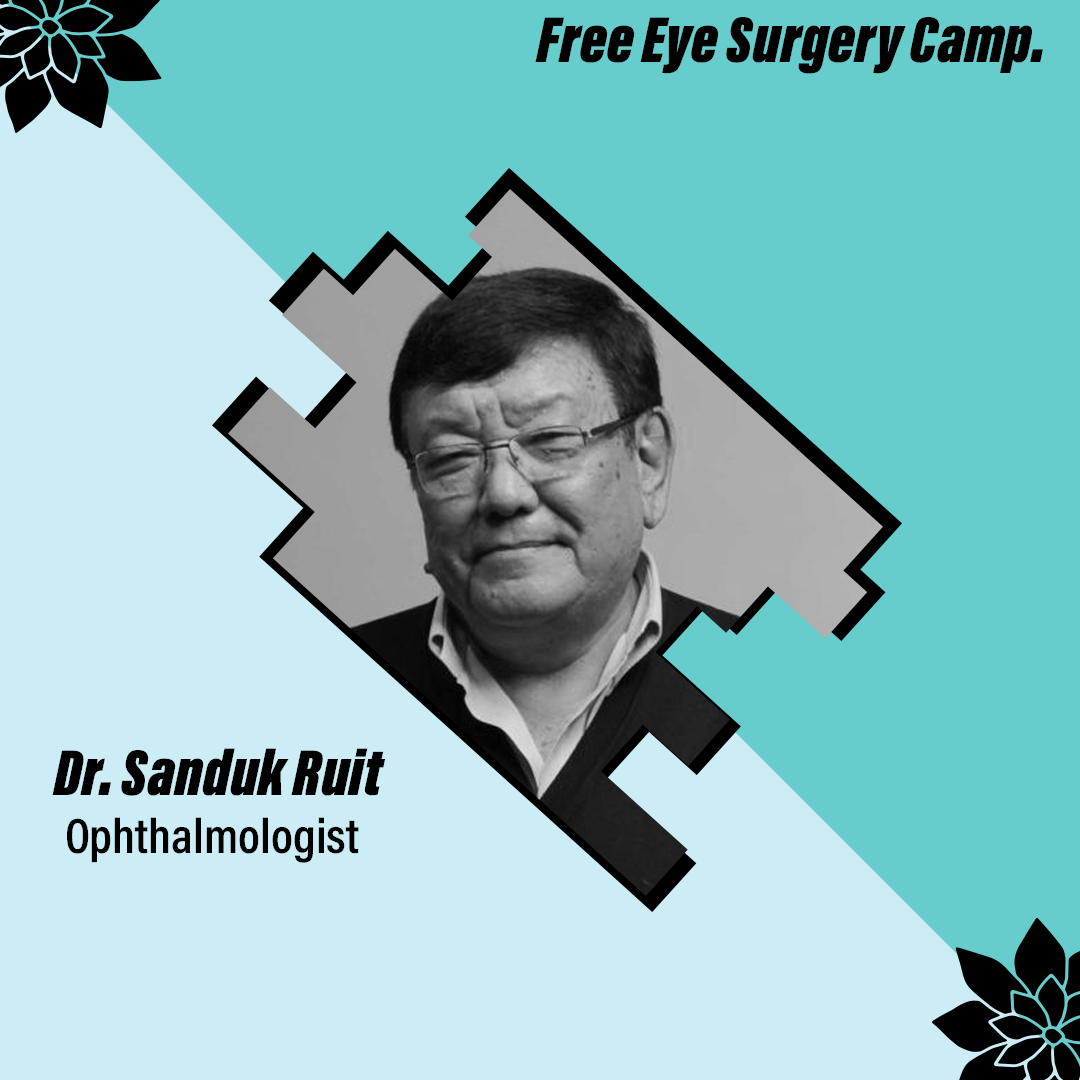
<style>
.page{position:relative;width:1080px;height:1080px;background:#ccedf5}
.page>*{position:absolute;margin:0}
.t1{font:66.7px "AcuminConcept-ExtraCondensedUltraBlackItalic";color:#000000}
.t2{font:50px "AcuminConcept-CondensedSemibold";color:#000000}
</style>
<div class="page">
<p class="t1" style="left:535px;top:17px;width:508px;height:57px">Free Eye Surgery Camp.</p>
<p class="t1" style="left:52px;top:748px;width:334px;height:48px">Dr. Sanduk Ruit</p>
<p class="t2" style="left:67px;top:817px;width:292px;height:46px">Ophthalmologist</p>
</div>
